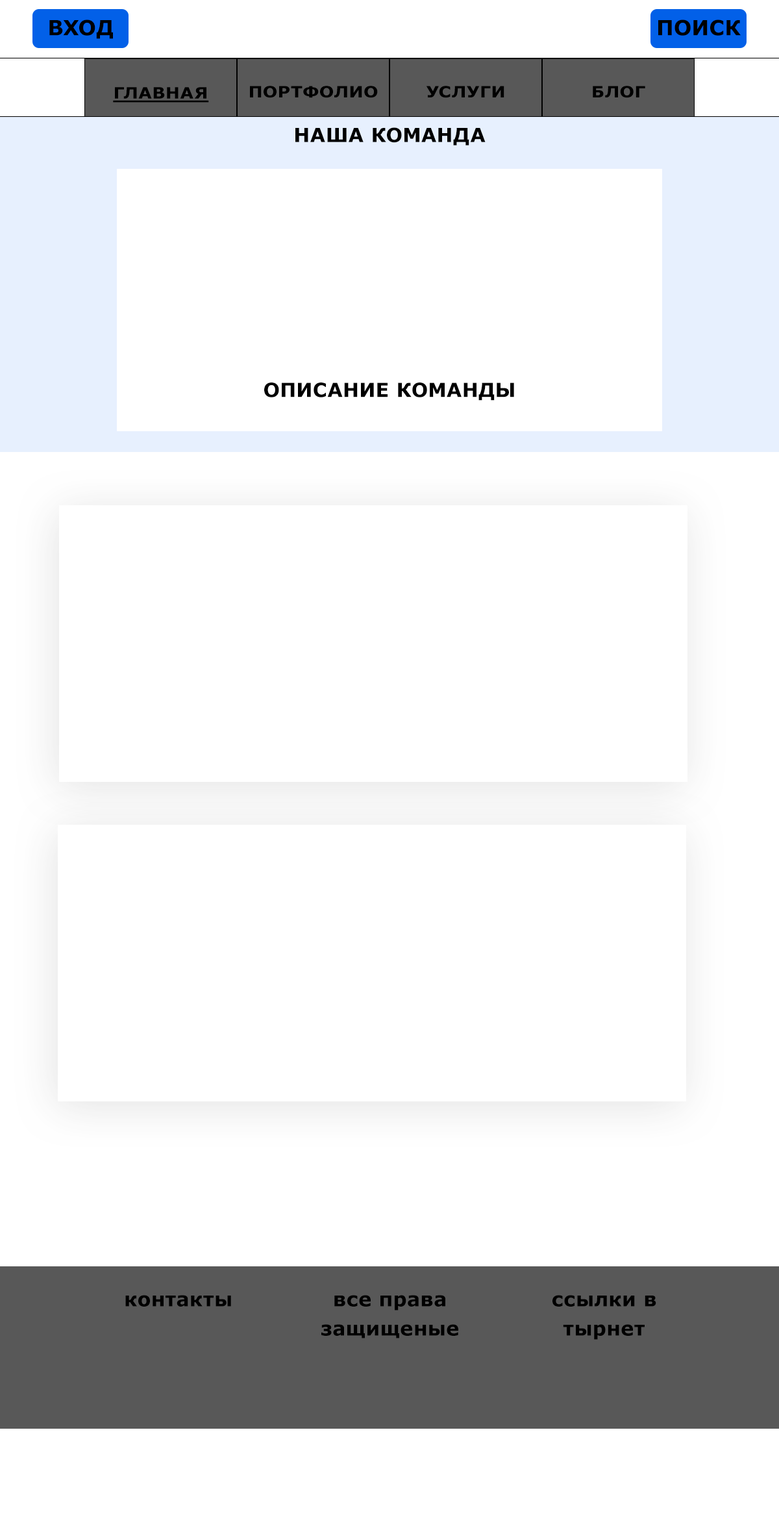
<style>
.page{position:relative;width:779px;height:1530px;background:#ffffff}
.page>*{position:absolute;margin:0}
.t1{font:20.8px "Verdana-Bold";letter-spacing:0.02em;color:#000000;font-variant:small-caps}
.t2{font:15.6px "Verdana-Bold";letter-spacing:0.02em;color:#000000;font-variant:small-caps;text-decoration:underline;scale:1.1 1}
.t3{font:29.9px "Verdana-Bold";letter-spacing:0.02em;color:#000000;font-variant:small-caps;scale:1.1 1}
.t4{font:15.6px "Verdana-Bold";letter-spacing:0.02em;color:#000000;font-variant:small-caps;scale:1.1 1}
.t5{font:19.5px "Verdana-Bold";letter-spacing:0.02em;color:#000000;font-variant:small-caps}
.t6{font:19.5px/29.2px "Verdana-Bold";letter-spacing:0.02em;color:#000000;font-variant:small-caps}
</style>
<div class="page">
<p class="t1" style="left:49px;top:19px;width:64px;height:20px">ВХОД</p>
<p class="t1" style="left:659px;top:19px;width:82px;height:17px">ПОИСК</p>
<p class="t2" style="left:113px;top:87px;width:96px;height:16px"><span class="t3"><br></span>ГЛАВНАЯ</p>
<p class="t4" style="left:250px;top:86px;width:128px;height:12px">ПОРТФОЛИО</p>
<p class="t4" style="left:426px;top:86px;width:79px;height:12px">УСЛУГИ</p>
<p class="t4" style="left:593px;top:86px;width:53px;height:12px">БЛОГ</p>
<p class="t5" style="left:295px;top:127px;width:191px;height:18px">НАША КОМАНДА</p>
<p class="t5" style="left:264px;top:383px;width:250px;height:18px">ОПИСАНИЕ КОМАНДЫ</p>
<p class="t5" style="left:125px;top:1295px;width:106px;height:12px">контакты</p>
<p class="t6" style="left:321px;top:1295px;width:138px;height:43px;text-align:center">все права защищеные</p>
<p class="t6" style="left:553px;top:1295px;width:104px;height:45px;text-align:center">ссылки в тырнет</p>
</div>
